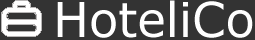
<style>
.page{position:relative;width:255px;height:40px;background:#333333}
.page>*{position:absolute;margin:0}
.t1{font:48px "Verdana";color:#ffffff}
</style>
<div class="page">
<p class="t1" style="left:57px;top:0px;width:196px;height:38px">HoteliCo</p>
</div>
